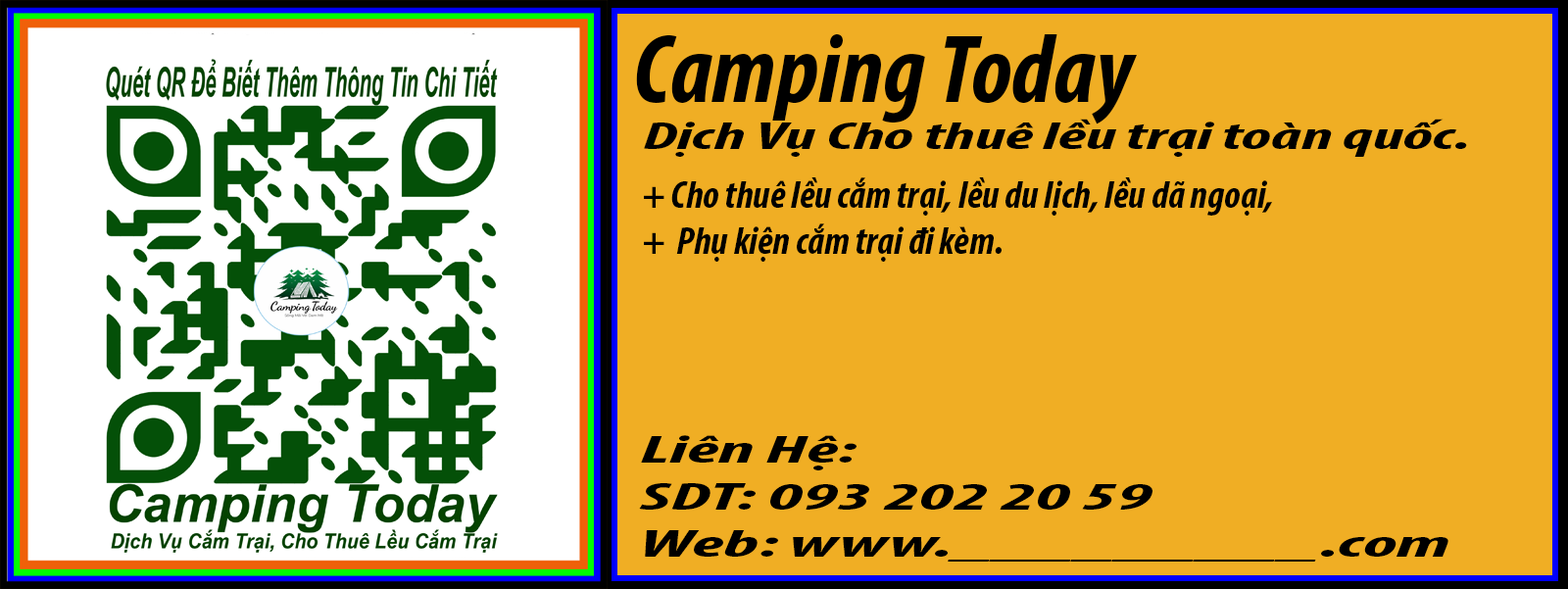
<style>
.page{position:relative;width:1568px;height:589px;background:#f0ae24}
.page>*{position:absolute;margin:0}
.t1{font:98px "MyriadPro-BoldCondIt";color:#000000}
.t2{font:38.8px "MyriadPro-BoldCondIt";color:#000000;scale:1.82 1}
.t3{font:39.1px "MyriadPro-BoldCondIt";color:#000000}
.t4{font:39.1px "MyriadPro-BoldCondIt";color:#000000;scale:2.09 1}
</style>
<div class="page">
<p class="t1" style="left:636px;top:34px;width:501px;height:90px">Camping Today</p>
<p class="t2" style="left:644px;top:119px;width:823px;height:38px">Dịch Vụ Cho thuê lều trại toàn quốc.</p>
<p class="t3" style="left:644px;top:177px;width:628px;height:85px">+ Cho thuê lều cắm trại, lều du lịch, lều dã ngoại, <br>+  Phụ kiện cắm trại đi kèm.</p>
<p class="t4" style="left:639px;top:435px;width:809px;height:127px">Liên Hệ: <br>SDT: 093 202 20 59<br>Web: www._________.com</p>
</div>
